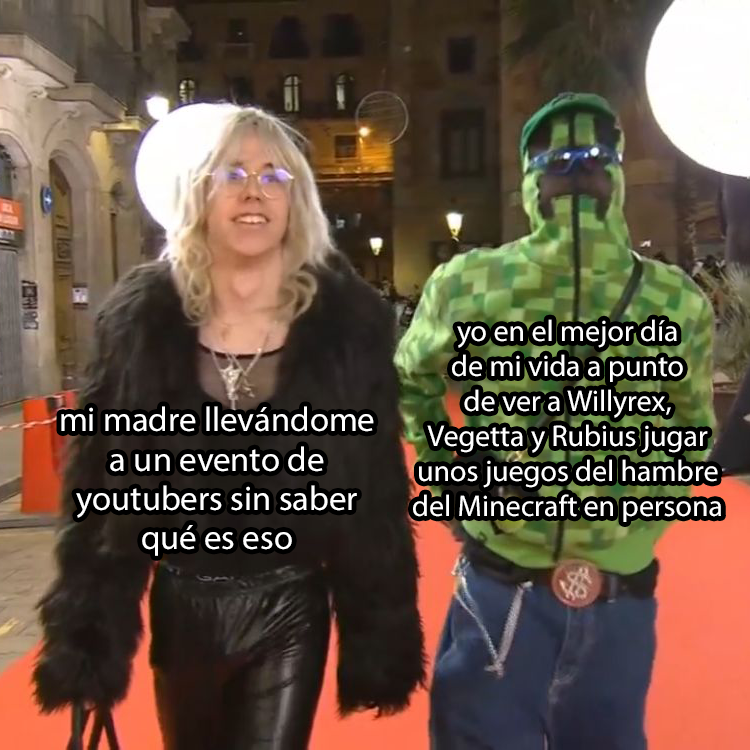
<style>
.page{position:relative;width:750px;height:750px}
.page>*{position:absolute;margin:0}
.t1{font:30px "MyriadPro-Regular";color:#ffffff}
.t2{font:34.7px "MyriadPro-Regular";color:#ffffff}
</style>
<div class="page">
<p class="t1" style="left:413px;top:319px;width:308px;height:203px;text-align:center">yo en el mejor día<br>de mi vida a punto<br>de ver a Willyrex,<br>Vegetta y Rubius jugar<br>unos juegos del hambre<br>del Minecraft en persona</p>
<p class="t2" style="left:61px;top:406px;width:313px;height:150px;text-align:center">mi madre llevándome<br>a un evento de<br>youtubers sin saber<br>qué es eso</p>
</div>
